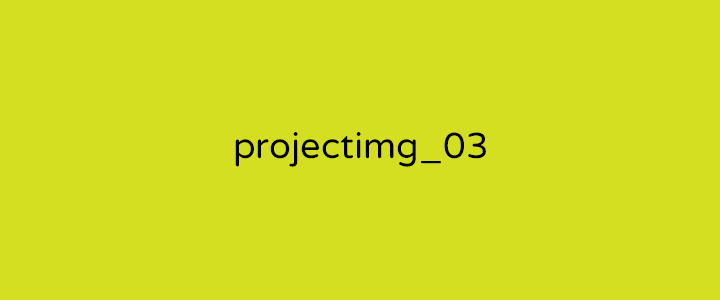
<style>
.page{position:relative;width:720px;height:300px;background:#d5df22}
.page>*{position:absolute;margin:0}
.t1{font:36px "VarelaRound-Regular";color:#000000}
</style>
<div class="page">
<p class="t1" style="left:235px;top:132px;width:251px;height:35px">projectimg_03</p>
</div>
